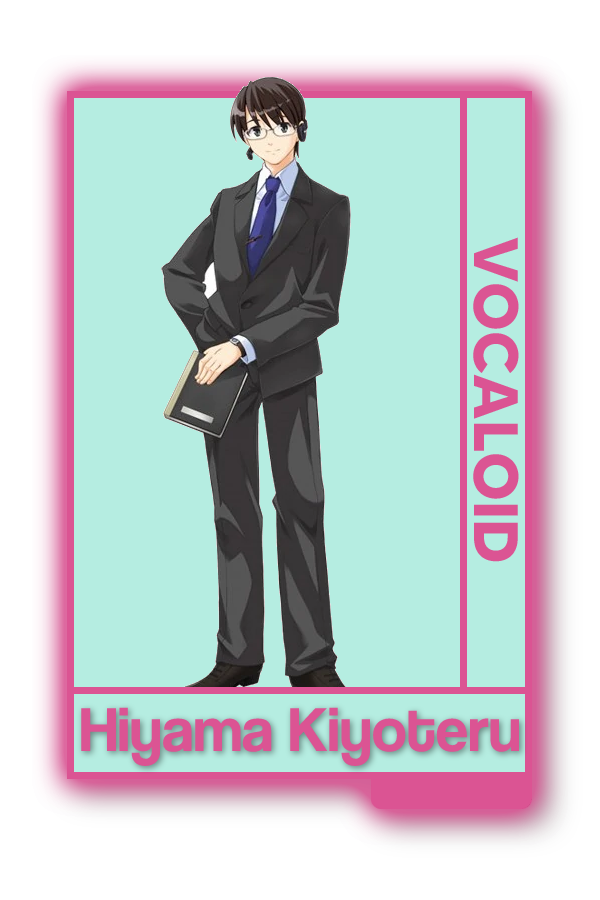
<style>
.page{position:relative;width:600px;height:900px;background:#b5ede1}
.page>*{position:absolute;margin:0}
.t1{font:62.5px "MADETOMMY-Bold";color:#db5493}
.t2{font:64.3px "CoolveticaRg-Regular";color:#db5493}
</style>
<div class="page">
<p class="t1" style="left:473px;top:237px;width:46px;height:325px;rotate:90deg">VOCALOID</p>
<p class="t2" style="left:81px;top:707px;width:438px;height:59px">Hiyama Kiyoteru</p>
</div>
